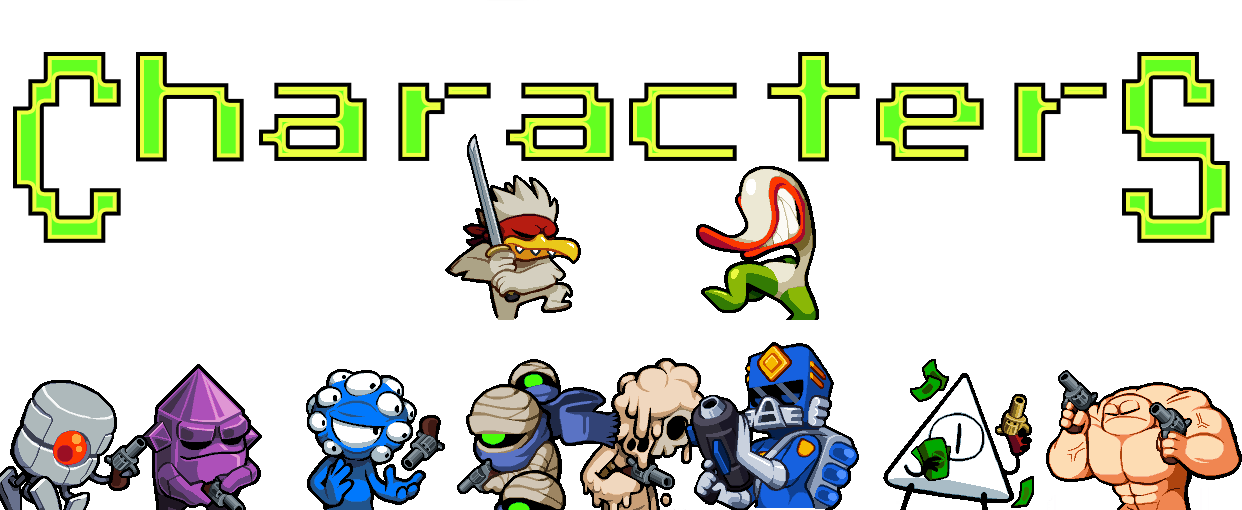
<style>
.page{position:relative;width:1242px;height:510px;background:#ffffff}
.page>*{position:absolute;margin:0}
.t1{font:124.8px "PressStart2P"}
.t2{font:218.4px "PressStart2P";scale:0.56 1}
</style>
<div class="page">
<p class="t1" style="left:13px;top:52px;width:1217px;height:191px"><span class="t2">C</span>haracter<span class="t2">S</span></p>
</div>
